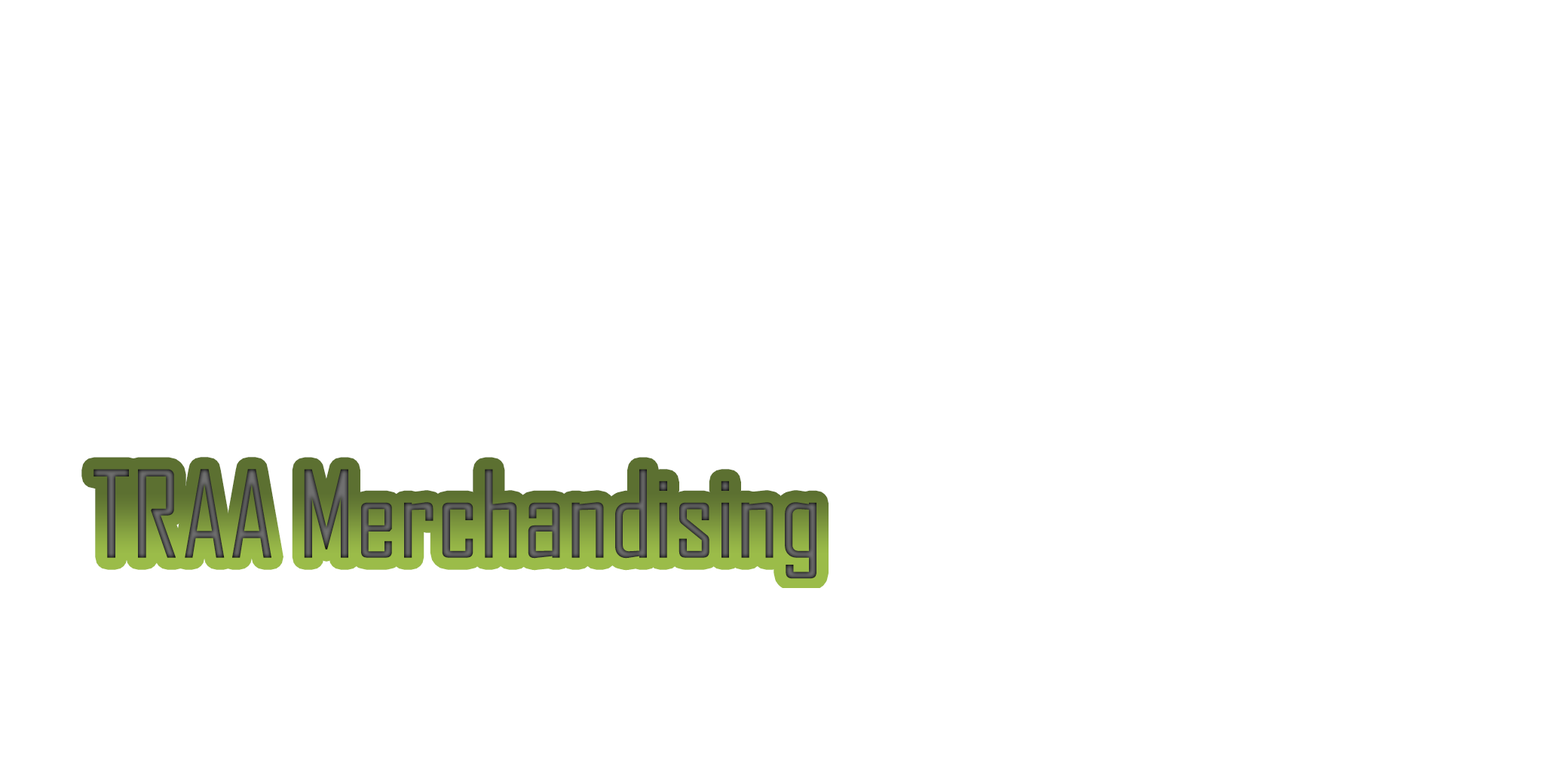
<style>
.page{position:relative;width:1544px;height:772px;background:#ffffff}
.page>*{position:absolute;margin:0}
.t1{font:115.5px "AgencyFB-Regular";color:#515151}
</style>
<div class="page">
<p class="t1" style="left:94px;top:469px;width:723px;height:110px">TRAA Merchandising</p>
</div>
